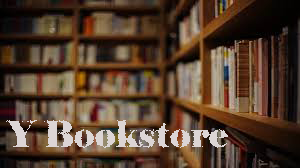
<style>
.page{position:relative;width:300px;height:168px}
.page>*{position:absolute;margin:0}
.t1{font:36px "Elephant-Regular";color:#dcd5d5}
</style>
<div class="page">
<p class="t1" style="left:5px;top:120px;width:223px;height:28px">Y Bookstore</p>
</div>
